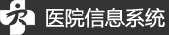
<style>
.page{position:relative;width:169px;height:35px;background:#333333}
.page>*{position:absolute;margin:0}
.t1{font:20px "MicrosoftYaHei";letter-spacing:0.005em;color:#ffffff}
</style>
<div class="page">
<p class="t1" style="left:46px;top:7px;width:119px;height:21px">医院信息系统</p>
</div>
